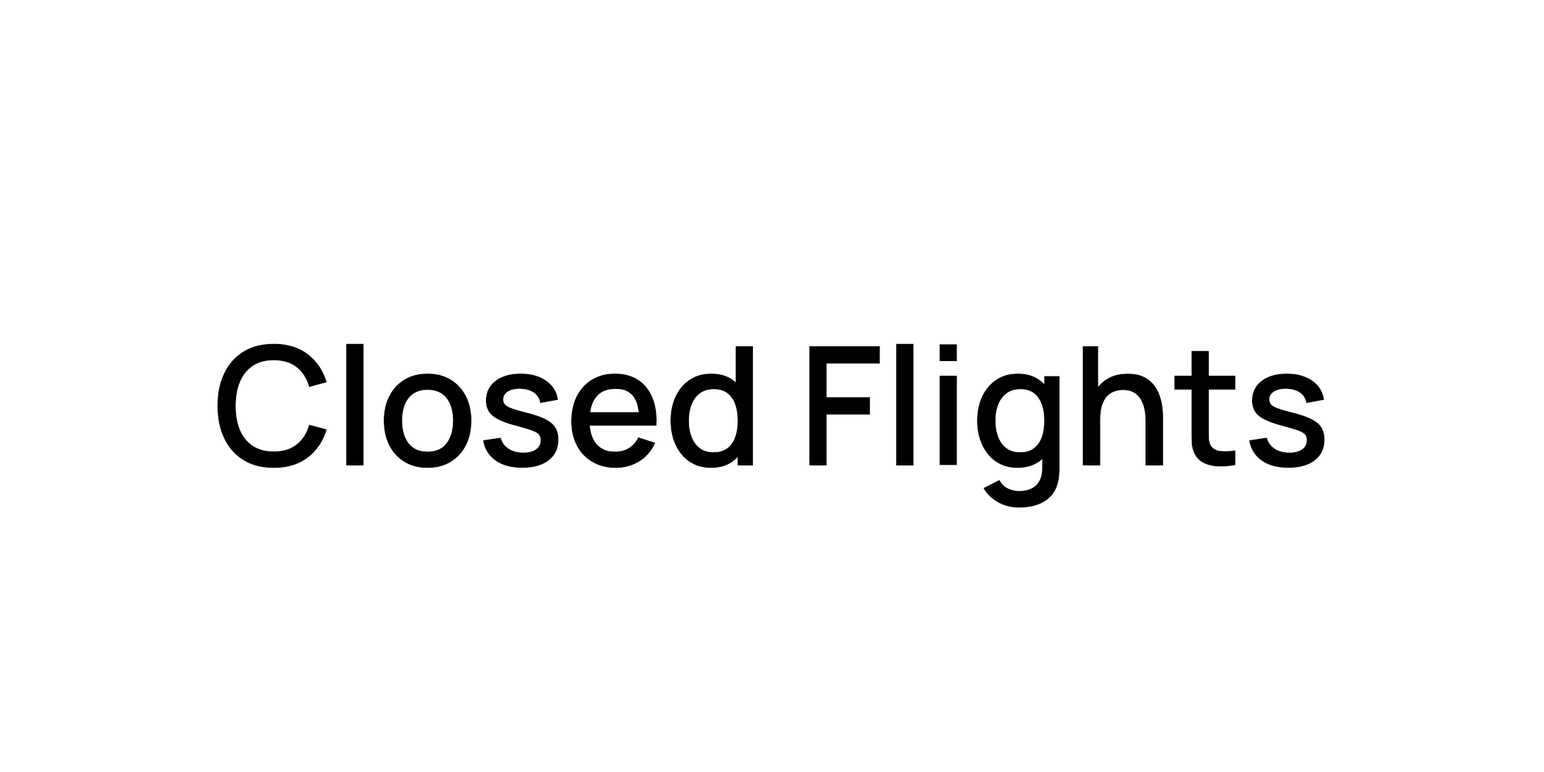
<style>
.page{position:relative;width:1544px;height:772px;background:#ffffff}
.page>*{position:absolute;margin:0}
.t1{font:165.5px "Manrope-SemiBold";color:#000000}
</style>
<div class="page">
<p class="t1" style="left:217px;top:343px;width:1108px;height:165px">Closed Flights</p>
</div>
